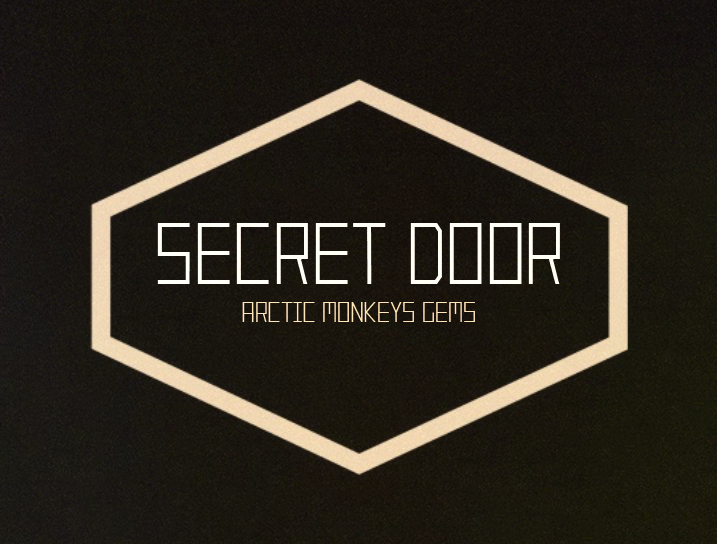
<style>
.page{position:relative;width:717px;height:544px}
.page>*{position:absolute;margin:0}
.t1{font:78.2px "Tranquilitynewbold-Regular";color:#f6f0ea}
.t2{font:26.1px "Tranquilitynewbold-Regular";color:#efd3af}
</style>
<div class="page">
<p class="t1" style="left:157px;top:223px;width:403px;height:61px">SECRET DOOR</p>
<p class="t2" style="left:242px;top:302px;width:233px;height:20px">ARCTIC MONKEYS GEMS</p>
</div>
